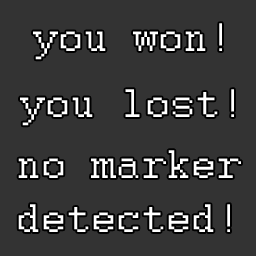
<style>
.page{position:relative;width:256px;height:256px;background:#333333}
.page>*{position:absolute;margin:0}
.t1{font:44.5px "Courier";color:#ffffff}
</style>
<div class="page">
<p class="t1" style="left:33px;top:23px;width:189px;height:37px">you won!</p>
<p class="t1" style="left:20px;top:89px;width:214px;height:37px">you lost!</p>
<p class="t1" style="left:18px;top:150px;width:223px;height:82px;text-align:center">no marker<br>detected!</p>
</div>
